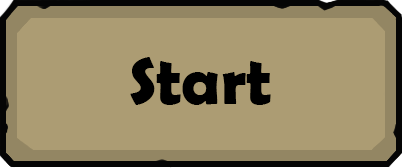
<style>
.page{position:relative;width:402px;height:168px;background:#ac9c73}
.page>*{position:absolute;margin:0}
.t1{font:66.7px "BerlinSansFBDemi-Bold";color:#000000}
</style>
<div class="page">
<p class="t1" style="left:130px;top:57px;width:141px;height:48px">Start</p>
</div>
